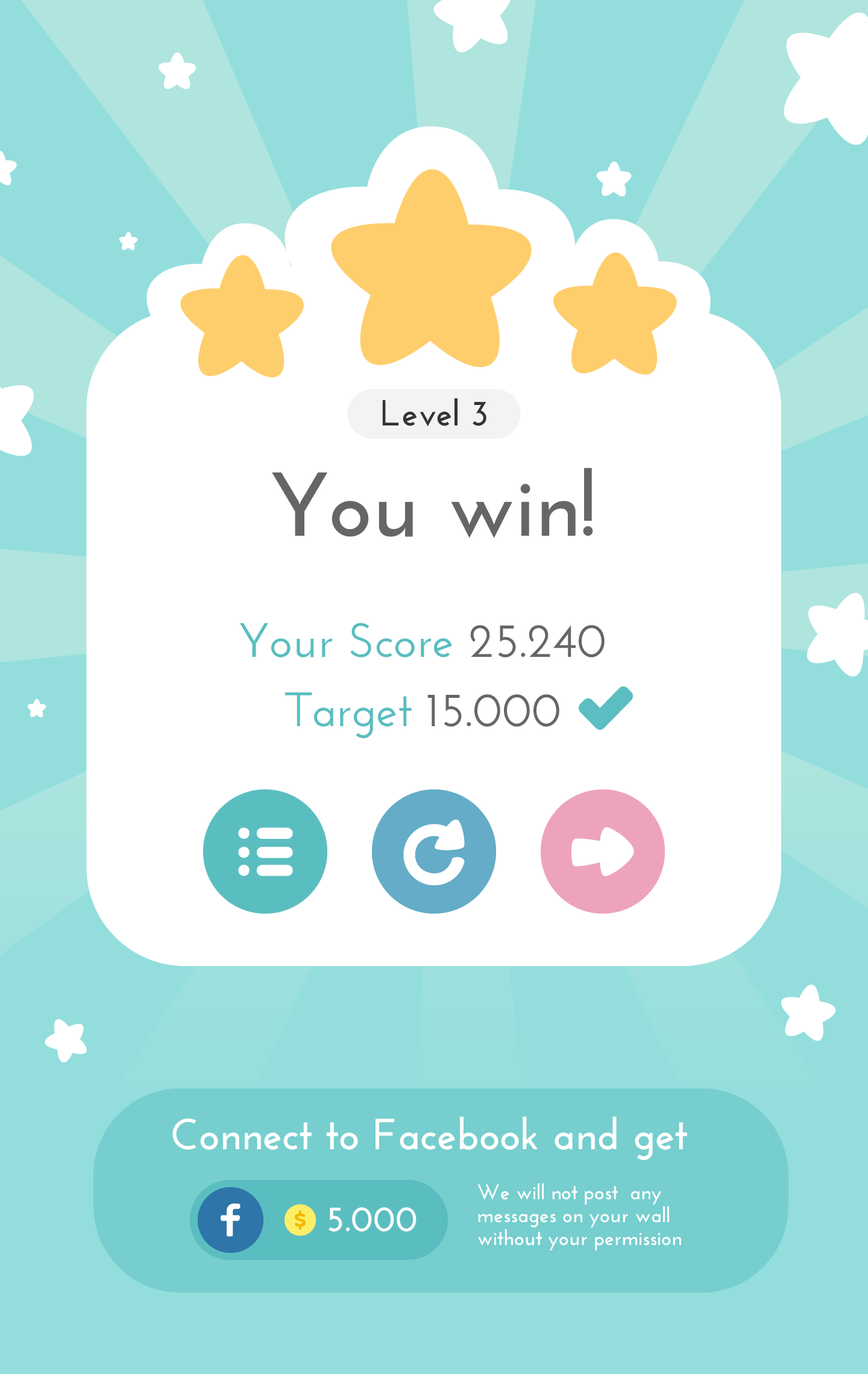
<style>
.page{position:relative;width:868px;height:1374px;background:#ffffff}
.page>*{position:absolute;margin:0}
.t1{font:36.2px "JosefinSans-Bold";color:#333333}
.t2{font:90.4px "JosefinSans-Bold";color:#666666}
.t3{font:48.2px "JosefinSans-SemiBold";color:#59bebf}
.t4{font:48.2px "JosefinSans-SemiBold";color:#666666}
.t5{font:43.4px "JosefinSans-Bold";color:#ffffff}
.t6{font:21.1px/22.8px "JosefinSans-Bold";color:#ffffff}
.t7{font:36.2px "JosefinSans-Bold";color:#ffffff}
</style>
<div class="page">
<p class="t1" style="left:382px;top:398px;width:104px;height:29px">Level 3</p>
<p class="t2" style="left:272px;top:468px;width:321px;height:70px">You win!</p>
<p class="t3" style="left:239px;top:623px;width:365px;height:34px">Your Score<span class="t4"> 25.240</span></p>
<p class="t3" style="left:285px;top:692px;width:274px;height:46px">Target<span class="t4"> 15.000</span></p>
<p class="t5" style="left:172px;top:1117px;width:515px;height:43px">Connect to Facebook and get</p>
<p class="t6" style="left:478px;top:1183px;width:203px;height:68px">We will not post  any messages on your wall  without your permission</p>
<p class="t7" style="left:328px;top:1207px;width:88px;height:25px">5.000</p>
</div>
